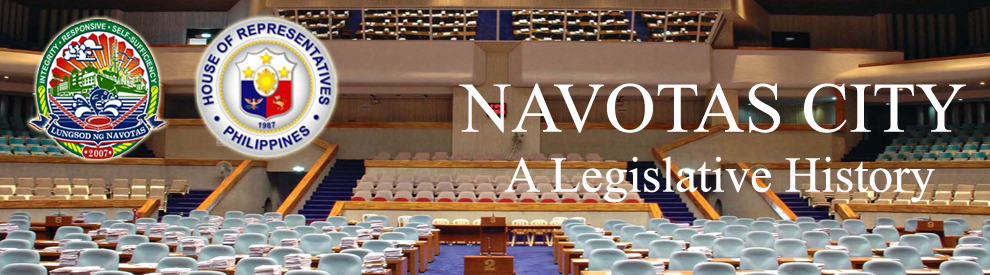
<style>
.page{position:relative;width:990px;height:275px}
.page>*{position:absolute;margin:0}
.t1{font:50px "TimesNewRomanPSMT";color:#fdfcfc}
.t2{font:70.8px "TimesNewRomanPSMT";color:#fdfdfd}
</style>
<div class="page">
<p class="t1" style="left:459px;top:83px;width:507px;height:120px;text-align:center"><span class="t2">NAVOTAS CITY<br></span>A Legislative History</p>
</div>
